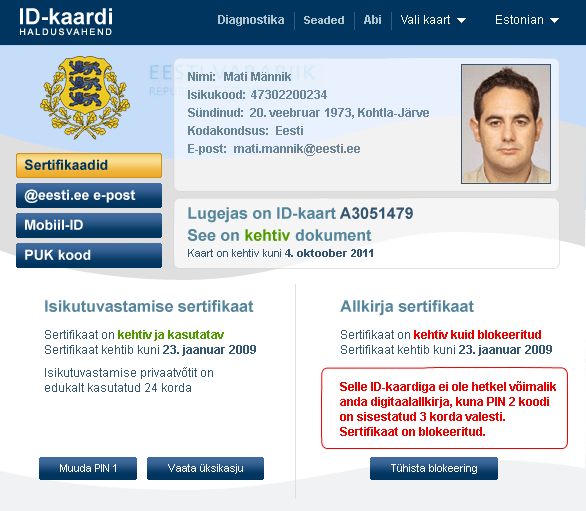
<style>
.page{position:relative;width:586px;height:511px;background:#ffffff}
.page>*{position:absolute;margin:0}
.t1{font:12px "Arial-BoldMT";color:#afc6d1}
.t2{font:11px "Arial-BoldMT";color:#afc6d1}
.t3{font:12px "ArialMT";color:#ffffff}
.t4{font:12px/18px "Arial-BoldMT";color:#668696}
.t5{font:12px/18px "Arial-BoldMT";color:#6a849a}
.t6{font:14px/30px "Arial-BoldMT";color:#ffffff}
.t7{font:14px/30px "Arial-BoldMT";color:#00355f}
.t8{font:16px "Arial-BoldMT";color:#54859b}
.t9{font:16px "Arial-BoldMT";color:#355670}
.t10{font:16px "Arial-BoldMT";color:#509b00}
.t11{font:11px "ArialMT";color:#355670}
.t12{font:11px "Arial-BoldMT";color:#355670}
.t13{font:12px/15px "ArialMT";color:#355670}
.t14{font:12px/15px "Arial-BoldMT";color:#509b00}
.t15{font:12px/15px "Arial-BoldMT";color:#355670}
.t16{font:12px/15px "Arial-BoldMT";color:#e80303}
.t17{font:11px "ArialMT";color:#ffffff}
</style>
<div class="page">
<p class="t1" style="left:218px;top:15px;width:66px;height:11px">Diagnostika</p>
<p class="t2" style="left:304px;top:16px;width:40px;height:8px">Seaded</p>
<p class="t1" style="left:364px;top:15px;width:17px;height:9px">Abi</p>
<p class="t3" style="left:401px;top:15px;width:49px;height:9px">Vali kaart</p>
<p class="t3" style="left:496px;top:15px;width:47px;height:9px">Estonian</p>
<p class="t4" style="left:188px;top:72px;width:80px;height:83px">Nimi:<br>Isikukood:<br>Sündinud:<br>Kodakondsus:<br>E-post:</p>
<p class="t5" style="left:224px;top:72px;width:205px;height:84px;text-align:right">Mati Männik                                              <br>47302200234                                  <br>20. veebruar 1973, Kohtla-Järve<br>Eesti                                          <br>mati.mannik@eesti.ee</p>
<p class="t6" style="left:24px;top:159px;width:112px;height:101px"><span class="t7">Sertifikaadid<br></span>@eesti.ee e-post<br>Mobiil-ID<br>PUK kood</p>
<p class="t8" style="left:188px;top:207px;width:225px;height:16px">Lugejas on ID-kaart <span class="t9">A3051479</span></p>
<p class="t8" style="left:187px;top:229px;width:185px;height:12px">See on <span class="t10">kehtiv </span>dokument</p>
<p class="t11" style="left:188px;top:249px;width:185px;height:8px">Kaart on kehtiv kuni <span class="t12">4. oktoober 2011</span></p>
<p class="t8" style="left:45px;top:300px;width:209px;height:12px">Isikutuvastamise sertifikaat</p>
<p class="t8" style="left:340px;top:300px;width:134px;height:16px">Allkirja sertifikaat</p>
<p class="t13" style="left:45px;top:330px;width:211px;height:26px">Sertifikaat on <span class="t14">kehtiv ja kasutatav<br></span>Sertifikaat kehtib kuni <span class="t15">23. jaanuar 2009</span></p>
<p class="t16" style="left:341px;top:330px;width:211px;height:26px"><span class="t13">Sertifikaat on </span>kehtiv kuid blokeeritud<br><span class="t13">Sertifikaat kehtib kuni </span><span class="t15">23. jaanuar 2009</span></p>
<p class="t13" style="left:45px;top:367px;width:168px;height:25px">Isikutuvastamise privaatvõtit on<br>edukalt kasutatud 24 korda</p>
<p class="t16" style="left:340px;top:381px;width:216px;height:55px">Selle ID-kaardiga ei ole hetkel võimalik <br>anda digitaalallkirja, kuna PIN 2 koodi <br>on sisestatud 3 korda valesti. <br>Sertifikaat on blokeeritud.</p>
<p class="t17" style="left:60px;top:464px;width:56px;height:8px">Muuda PIN 1</p>
<p class="t17" style="left:168px;top:464px;width:75px;height:10px">Vaata üksikasju</p>
<p class="t17" style="left:391px;top:464px;width:86px;height:10px">Tühista blokeering</p>
</div>
